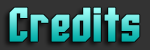
<style>
.page{position:relative;width:150px;height:50px;background:#333333}
.page>*{position:absolute;margin:0}
.t1{font:47.9px "Whitestone-Bold"}
</style>
<div class="page">
<p class="t1" style="left:9px;top:7px;width:131px;height:35px">Credits</p>
</div>
